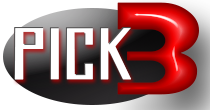
<style>
.page{position:relative;width:210px;height:110px;background:#ffffff}
.page>*{position:absolute;margin:0}
.t1{font:139.8px "CrystalRadioKit";text-transform:uppercase;font-weight:bold;scale:1.37 1}
.t2{font:64.3px "DKAmericain";color:#ffffff;text-transform:uppercase;font-weight:bold;scale:1.79 1}
</style>
<div class="page">
<p class="t1" style="left:117px;top:2px;width:82px;height:93px">3</p>
<p class="t2" style="left:13px;top:27px;width:119px;height:53px">PICK</p>
</div>
